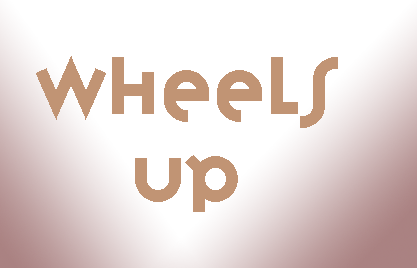
<style>
.page{position:relative;width:417px;height:268px;background:#ffffff}
.page>*{position:absolute;margin:0}
.t1{font:72px "VariexOT-Regular";color:#c19474}
</style>
<div class="page">
<p class="t1" style="left:36px;top:56px;width:302px;height:156px;text-align:center">Wheels<br>UP</p>
</div>
